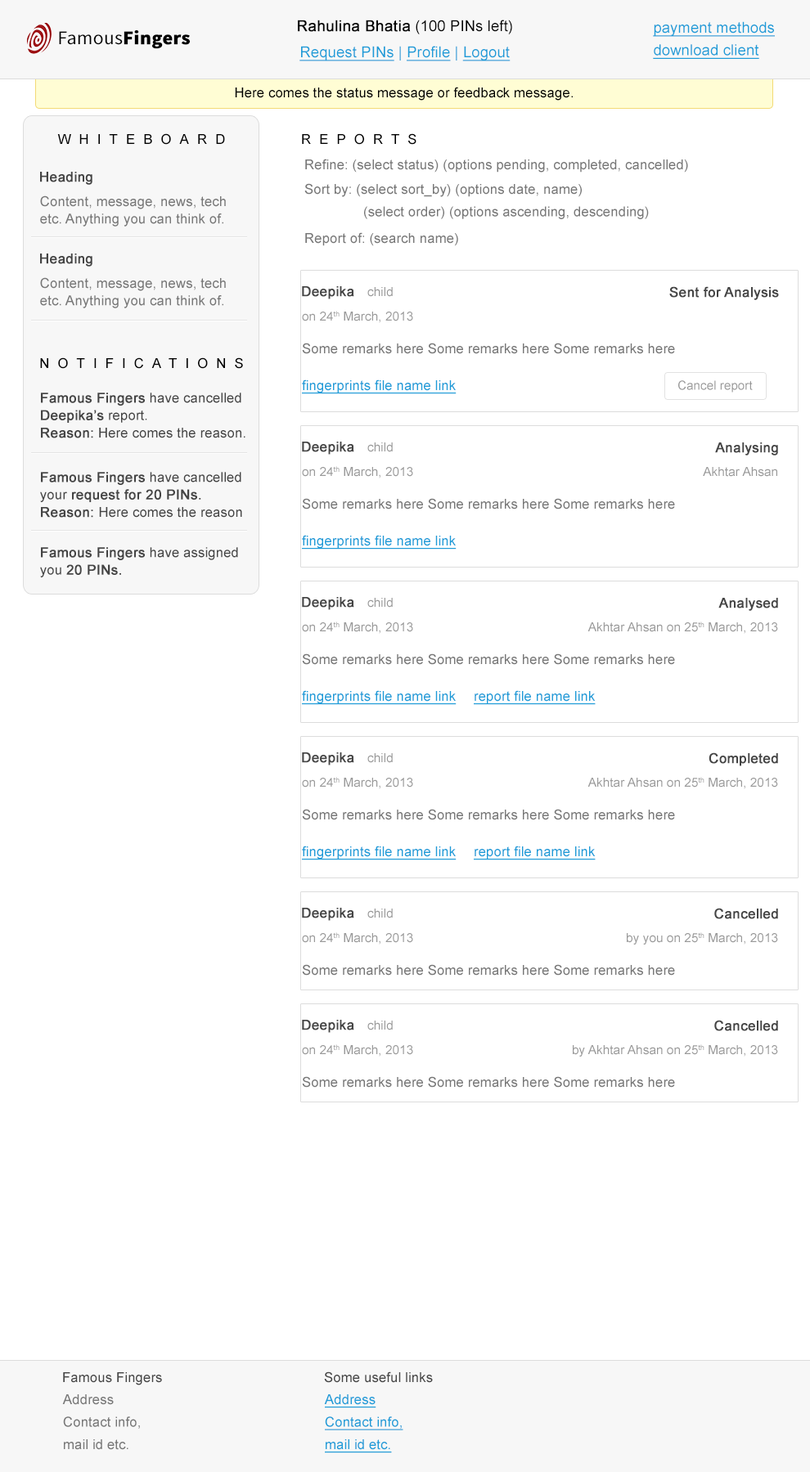
<style>
.page{position:relative;width:810px;height:1472px;background:#ffffff}
.page>*{position:absolute;margin:0}
.t1{font:15px "ArialMT";letter-spacing:0.01em;color:#000000;font-weight:bold}
.t2{font:15px "ArialMT";letter-spacing:0.01em;color:#000000}
.t3{font:15px/22.5px "ArialMT";letter-spacing:0.01em;color:#1c9cd8;text-decoration:underline}
.t4{font:19.2px "SourceSansPro-Bold";letter-spacing:0.01em;color:#000000;font-weight:bold}
.t5{font:19.2px "SourceSansPro-Regular";letter-spacing:0.01em;color:#000000}
.t6{font:15px "ArialMT";letter-spacing:0.01em;color:#1c9cd8;text-decoration:underline}
.t7{font:15px "ArialMT";letter-spacing:0.01em;color:#1c9cd8}
.t8{font:13.7px "ArialMT";letter-spacing:0.005em;color:#000000}
.t9{font:13.7px "ArialMT";letter-spacing:0.6em;color:#000000;text-transform:uppercase}
.t10{font:13.7px "ArialMT";letter-spacing:0.005em;color:#777777}
.t11{font:13.7px "ArialMT";letter-spacing:0.005em;color:#444444;font-weight:bold}
.t12{font:13.7px/22.5px "ArialMT";letter-spacing:0.005em;color:#777777}
.t13{font:13.7px/17.5px "ArialMT";letter-spacing:0.005em;color:#777777}
.t14{font:12.5px "ArialMT";letter-spacing:0.005em;color:#999999}
.t15{font:13.7px "ArialMT";letter-spacing:0.005em;color:#1c9cd8;text-decoration:underline}
.t16{font:13.7px/17.5px "ArialMT";letter-spacing:0.005em;color:#444444}
.t17{font:13.7px/17.5px "ArialMT";letter-spacing:0.005em;color:#444444;font-weight:bold}
.t18{font:13.7px "ArialMT";letter-spacing:0.005em;color:#444444}
.t19{font:13.7px/22.5px "ArialMT";letter-spacing:0.005em;color:#1c9cd8;text-decoration:underline}
</style>
<div class="page">
<p class="t1" style="left:298px;top:20px;width:214px;height:14px">Rahulina Bhatia<span class="t2"> (100 PINs left)</span></p>
<p class="t3" style="left:653px;top:21px;width:122px;height:38px">payment methods<br>download client</p>
<p class="t4" style="left:59px;top:30px;width:131px;height:19px"><span class="t5">Famous</span>Fingers</p>
<p class="t6" style="left:299px;top:46px;width:211px;height:15px">Request PINs<span class="t7"> | </span>Profile<span class="t7"> | </span>Logout</p>
<p class="t8" style="left:235px;top:87px;width:338px;height:14px">Here comes the status message or feedback message.</p>
<p class="t9" style="left:57px;top:133px;width:168px;height:12px">Whiteboard</p>
<p class="t9" style="left:302px;top:133px;width:114px;height:12px">Reports</p>
<p class="t10" style="left:305px;top:159px;width:383px;height:14px">Refine: (select status) (options pending, completed, cancelled)</p>
<p class="t11" style="left:40px;top:172px;width:52px;height:13px">Heading</p>
<p class="t12" style="left:304px;top:183px;width:345px;height:36px">Sort by: (select sort_by) (options date, name)<br>  (select order) (options ascending, descending)</p>
<p class="t13" style="left:40px;top:196px;width:186px;height:31px">Content, message, news, tech etc. Anything you can think of.</p>
<p class="t10" style="left:305px;top:232px;width:153px;height:14px">Report of: (search name)</p>
<p class="t11" style="left:40px;top:254px;width:52px;height:13px">Heading</p>
<p class="t13" style="left:40px;top:277px;width:186px;height:31px">Content, message, news, tech etc. Anything you can think of.</p>
<p class="t11" style="left:302px;top:286px;width:52px;height:13px">Deepika</p>
<p class="t14" style="left:367px;top:287px;width:26px;height:10px">child</p>
<p class="t11" style="left:669px;top:286px;width:110px;height:14px">Sent for Analysis</p>
<p class="t14" style="left:302px;top:311px;width:111px;height:12px">on 24th March, 2013</p>
<p class="t10" style="left:302px;top:343px;width:373px;height:11px">Some remarks here Some remarks here Some remarks here</p>
<p class="t9" style="left:40px;top:357px;width:203px;height:12px">Notifications</p>
<p class="t15" style="left:302px;top:380px;width:154px;height:14px">fingerprints file name link</p>
<p class="t14" style="left:678px;top:380px;width:75px;height:13px">Cancel report</p>
<p class="t16" style="left:41px;top:393px;width:204px;height:45px"><span class="t17">Famous Fingers</span> have cancelled <span class="t17">Deepika’s</span> report.<br><span class="t17">Reason:</span> Here comes the reason.</p>
<p class="t11" style="left:302px;top:442px;width:52px;height:13px">Deepika</p>
<p class="t14" style="left:367px;top:443px;width:26px;height:9px">child</p>
<p class="t11" style="left:715px;top:443px;width:63px;height:13px">Analysing</p>
<p class="t17" style="left:40px;top:472px;width:202px;height:46px">Famous Fingers<span class="t16"> have cancelled your </span>request for 20 PINs.<br>Reason: <span class="t16">Here comes the reason</span></p>
<p class="t14" style="left:302px;top:466px;width:111px;height:13px">on 24th March, 2013</p>
<p class="t14" style="left:703px;top:467px;width:74px;height:10px">Akhtar Ahsan</p>
<p class="t10" style="left:302px;top:498px;width:373px;height:12px">Some remarks here Some remarks here Some remarks here</p>
<p class="t15" style="left:302px;top:535px;width:154px;height:15px">fingerprints file name link</p>
<p class="t16" style="left:40px;top:547px;width:198px;height:31px"><span class="t17">Famous Fingers</span> have assigned you <span class="t17">20 PINs.</span></p>
<p class="t11" style="left:302px;top:597px;width:52px;height:13px">Deepika</p>
<p class="t14" style="left:367px;top:598px;width:26px;height:10px">child</p>
<p class="t11" style="left:718px;top:598px;width:60px;height:13px">Analysed</p>
<p class="t14" style="left:302px;top:622px;width:111px;height:12px">on 24th March, 2013</p>
<p class="t14" style="left:587px;top:622px;width:191px;height:12px">Akhtar Ahsan on 25th March, 2013</p>
<p class="t10" style="left:302px;top:654px;width:373px;height:11px">Some remarks here Some remarks here Some remarks here</p>
<p class="t15" style="left:302px;top:690px;width:154px;height:15px">fingerprints file name link</p>
<p class="t15" style="left:474px;top:690px;width:122px;height:15px">report file name link</p>
<p class="t11" style="left:302px;top:753px;width:52px;height:13px">Deepika</p>
<p class="t14" style="left:367px;top:753px;width:26px;height:10px">child</p>
<p class="t11" style="left:708px;top:753px;width:70px;height:13px">Completed</p>
<p class="t14" style="left:302px;top:777px;width:111px;height:12px">on 24th March, 2013</p>
<p class="t14" style="left:587px;top:777px;width:191px;height:12px">Akhtar Ahsan on 25th March, 2013</p>
<p class="t10" style="left:302px;top:809px;width:373px;height:11px">Some remarks here Some remarks here Some remarks here</p>
<p class="t15" style="left:302px;top:846px;width:154px;height:15px">fingerprints file name link</p>
<p class="t15" style="left:474px;top:846px;width:122px;height:15px">report file name link</p>
<p class="t11" style="left:302px;top:908px;width:52px;height:13px">Deepika</p>
<p class="t14" style="left:367px;top:909px;width:26px;height:10px">child</p>
<p class="t11" style="left:714px;top:908px;width:64px;height:11px">Cancelled</p>
<p class="t14" style="left:302px;top:933px;width:111px;height:12px">on 24th March, 2013</p>
<p class="t14" style="left:627px;top:933px;width:151px;height:12px">by you on 25th March, 2013</p>
<p class="t10" style="left:302px;top:964px;width:373px;height:12px">Some remarks here Some remarks here Some remarks here</p>
<p class="t11" style="left:302px;top:1020px;width:52px;height:13px">Deepika</p>
<p class="t14" style="left:367px;top:1021px;width:26px;height:10px">child</p>
<p class="t11" style="left:714px;top:1020px;width:64px;height:12px">Cancelled</p>
<p class="t14" style="left:302px;top:1045px;width:111px;height:12px">on 24th March, 2013</p>
<p class="t14" style="left:573px;top:1045px;width:205px;height:12px">by Akhtar Ahsan on 25th March, 2013</p>
<p class="t10" style="left:302px;top:1077px;width:373px;height:11px">Some remarks here Some remarks here Some remarks here</p>
<p class="t18" style="left:63px;top:1373px;width:99px;height:13px">Famous Fingers</p>
<p class="t18" style="left:324px;top:1372px;width:109px;height:11px">Some useful links</p>
<p class="t12" style="left:62px;top:1395px;width:78px;height:55px">Address<br>Contact info,<br>mail id etc.</p>
<p class="t19" style="left:324px;top:1395px;width:79px;height:59px">Address<br>Contact info,<br>mail id etc.</p>
</div>
